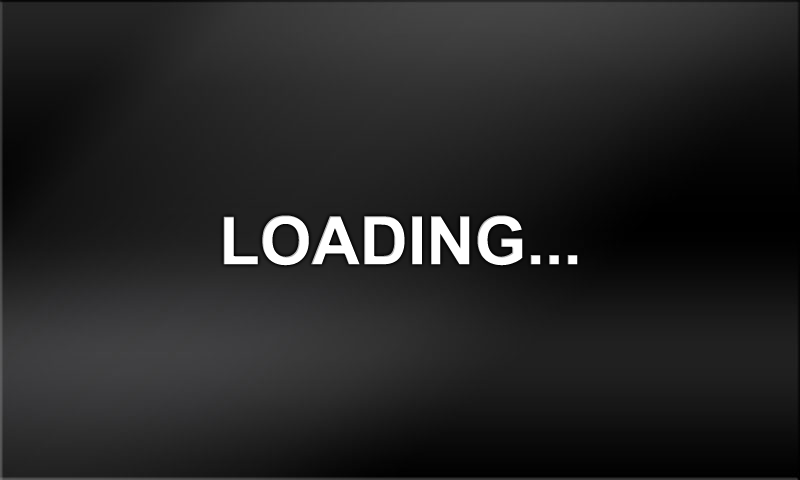
<style>
.page{position:relative;width:800px;height:480px}
.page>*{position:absolute;margin:0}
.t1{font:66.7px "Arial-BoldMT";color:#ffffff}
</style>
<div class="page">
<p class="t1" style="left:223px;top:215px;width:355px;height:51px">LOADING...</p>
</div>
